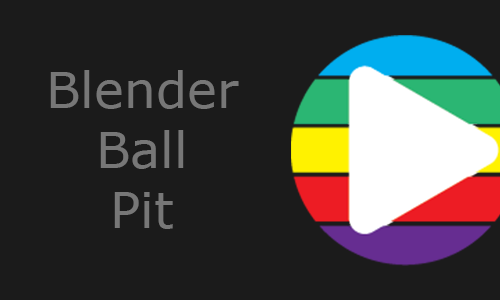
<style>
.page{position:relative;width:500px;height:300px;background:#1b1b1b}
.page>*{position:absolute;margin:0}
.t1{font:50px "Verdana";color:#777777}
</style>
<div class="page">
<p class="t1" style="left:50px;top:70px;width:189px;height:159px;text-align:center">Blender<br>Ball<br>Pit</p>
</div>
